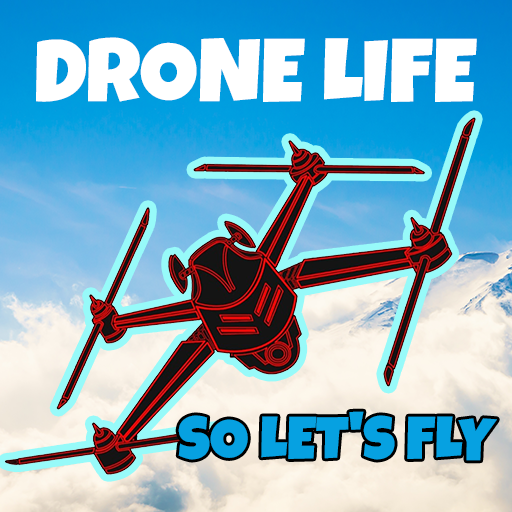
<style>
.page{position:relative;width:512px;height:512px}
.page>*{position:absolute;margin:0}
.t1{font:90px "LuckiestGuy-Regular";color:#ffffff;text-transform:uppercase}
.t2{font:60px "LuckiestGuy-Regular";color:#06a1e1;text-transform:uppercase}
</style>
<div class="page">
<p class="t1" style="left:36px;top:37px;width:441px;height:65px">DRONE LIFE</p>
<p class="t2" style="left:178px;top:411px;width:319px;height:50px">SO LET'S FLY</p>
</div>
